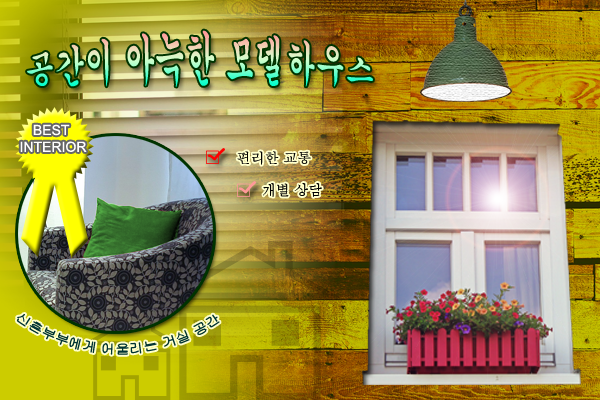
<style>
.page{position:relative;width:600px;height:400px}
.page>*{position:absolute;margin:0}
.t1{font:30px "Gungsuh"}
.t2{font:14px "ArialMT";color:#ffffff}
.t3{font:14px "Batang";color:#000000}
.t4{font:13px "Gulim";color:#003333}
</style>
<div class="page">
<p class="t1" style="left:27px;top:30px;width:346px;height:57px;text-align:center">공간이 아늑한 모델하우스</p>
<p class="t2" style="left:20px;top:124px;width:67px;height:28px;text-align:center">BEST <br>INTERIOR</p>
<p class="t3" style="left:237px;top:151px;width:74px;height:14px">편리한 교통</p>
<p class="t3" style="left:263px;top:183px;width:59px;height:14px">개별 상담</p>
<p class="t4" style="left:16px;top:314px;width:204px;height:41px;text-align:center">신혼부부에게 어울리는 거실 공간</p>
</div>
